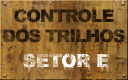
<style>
.page{position:relative;width:128px;height:80px}
.page>*{position:absolute;margin:0}
.t1{font:17.5px/20.7px "Arial-Black";letter-spacing:-0.07em}
</style>
<div class="page">
<p class="t1" style="left:3px;top:9px;width:122px;height:34px;text-align:center">CONTROLE<br> DOS TRILHOS</p>
</div>
